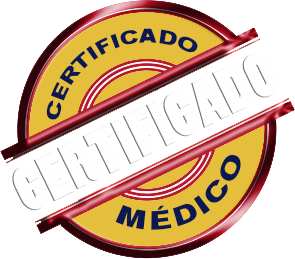
<style>
.page{position:relative;width:295px;height:259px;background:#ffffff}
.page>*{position:absolute;margin:0}
.t1{font:18.5px "Arial-Black";color:#0b1950}
.t2{font:14.8px "PoplarStd";color:#fefefe}
.t3{font:25px "Arial-Black";color:#0b1950}
</style>
<div class="page">
<p class="t1" style="left:46px;top:28px;width:152px;height:92px;rotate:-26deg">CERTIFICADO</p>
<p class="t2" style="left:12px;top:52px;width:266px;height:159px;rotate:-26deg">CERTIFICADO</p>
<p class="t3" style="left:115px;top:154px;width:126px;height:76px;rotate:-26deg">MÉDICO</p>
</div>
